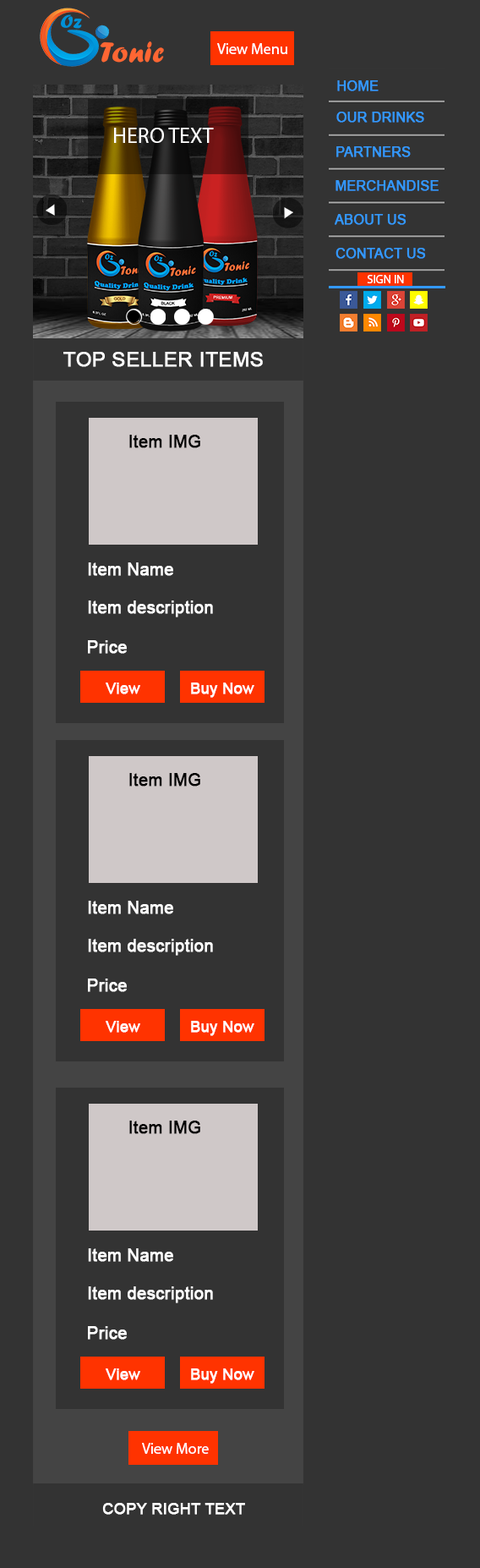
<style>
.page{position:relative;width:480px;height:1568px;background:#333333}
.page>*{position:absolute;margin:0}
.t1{font:15.2px "MyriadPro-Regular";color:#ffffff}
.t2{font:13.5px "ArialMT";color:#3399ff;font-weight:bold}
.t3{font:22px "MyriadPro-Regular";color:#ffffff}
.t4{font:11.8px "MyriadPro-Regular";color:#ffffff}
.t5{font:20.3px "ArialMT";color:#ffffff;font-weight:bold}
.t6{font:16.9px "ArialMT";color:#000000;font-weight:bold}
.t7{font:16.9px "ArialMT";color:#ffffff;font-weight:bold}
.t8{font:15.2px "ArialMT";color:#ffffff;font-weight:bold}
</style>
<div class="page">
<p class="t1" style="left:217px;top:43px;width:71px;height:11px">View Menu</p>
<p class="t2" style="left:337px;top:80px;width:42px;height:11px">HOME</p>
<p class="t2" style="left:337px;top:112px;width:88px;height:11px">OUR DRINKS</p>
<p class="t3" style="left:114px;top:128px;width:100px;height:15px">HERO TEXT</p>
<p class="t2" style="left:337px;top:146px;width:74px;height:11px">PARTNERS</p>
<p class="t2" style="left:336px;top:180px;width:103px;height:11px">MERCHANDISE</p>
<p class="t2" style="left:335px;top:214px;width:72px;height:11px">ABOUT US</p>
<p class="t2" style="left:336px;top:248px;width:90px;height:11px">CONTACT US</p>
<p class="t4" style="left:367px;top:275px;width:37px;height:8px">SIGN IN</p>
<p class="t5" style="left:63px;top:352px;width:200px;height:15px">TOP SELLER ITEMS</p>
<p class="t6" style="left:129px;top:435px;width:71px;height:13px">Item IMG</p>
<p class="t7" style="left:88px;top:562px;width:85px;height:14px">Item Name</p>
<p class="t7" style="left:88px;top:600px;width:125px;height:17px">Item description</p>
<p class="t7" style="left:88px;top:640px;width:39px;height:14px">Price</p>
<p class="t8" style="left:106px;top:683px;width:34px;height:11px">View</p>
<p class="t8" style="left:191px;top:683px;width:64px;height:15px">Buy Now</p>
<p class="t6" style="left:129px;top:773px;width:71px;height:14px">Item IMG</p>
<p class="t7" style="left:88px;top:901px;width:85px;height:13px">Item Name</p>
<p class="t7" style="left:88px;top:939px;width:125px;height:17px">Item description</p>
<p class="t7" style="left:88px;top:979px;width:39px;height:13px">Price</p>
<p class="t8" style="left:106px;top:1021px;width:34px;height:12px">View</p>
<p class="t8" style="left:191px;top:1021px;width:64px;height:15px">Buy Now</p>
<p class="t6" style="left:129px;top:1121px;width:71px;height:13px">Item IMG</p>
<p class="t7" style="left:88px;top:1248px;width:85px;height:14px">Item Name</p>
<p class="t7" style="left:88px;top:1286px;width:125px;height:17px">Item description</p>
<p class="t7" style="left:88px;top:1326px;width:39px;height:14px">Price</p>
<p class="t8" style="left:106px;top:1368px;width:34px;height:12px">View</p>
<p class="t8" style="left:191px;top:1368px;width:64px;height:16px">Buy Now</p>
<p class="t1" style="left:142px;top:1443px;width:67px;height:11px">View More</p>
<p class="t8" style="left:102px;top:1503px;width:143px;height:12px">COPY RIGHT TEXT</p>
</div>
